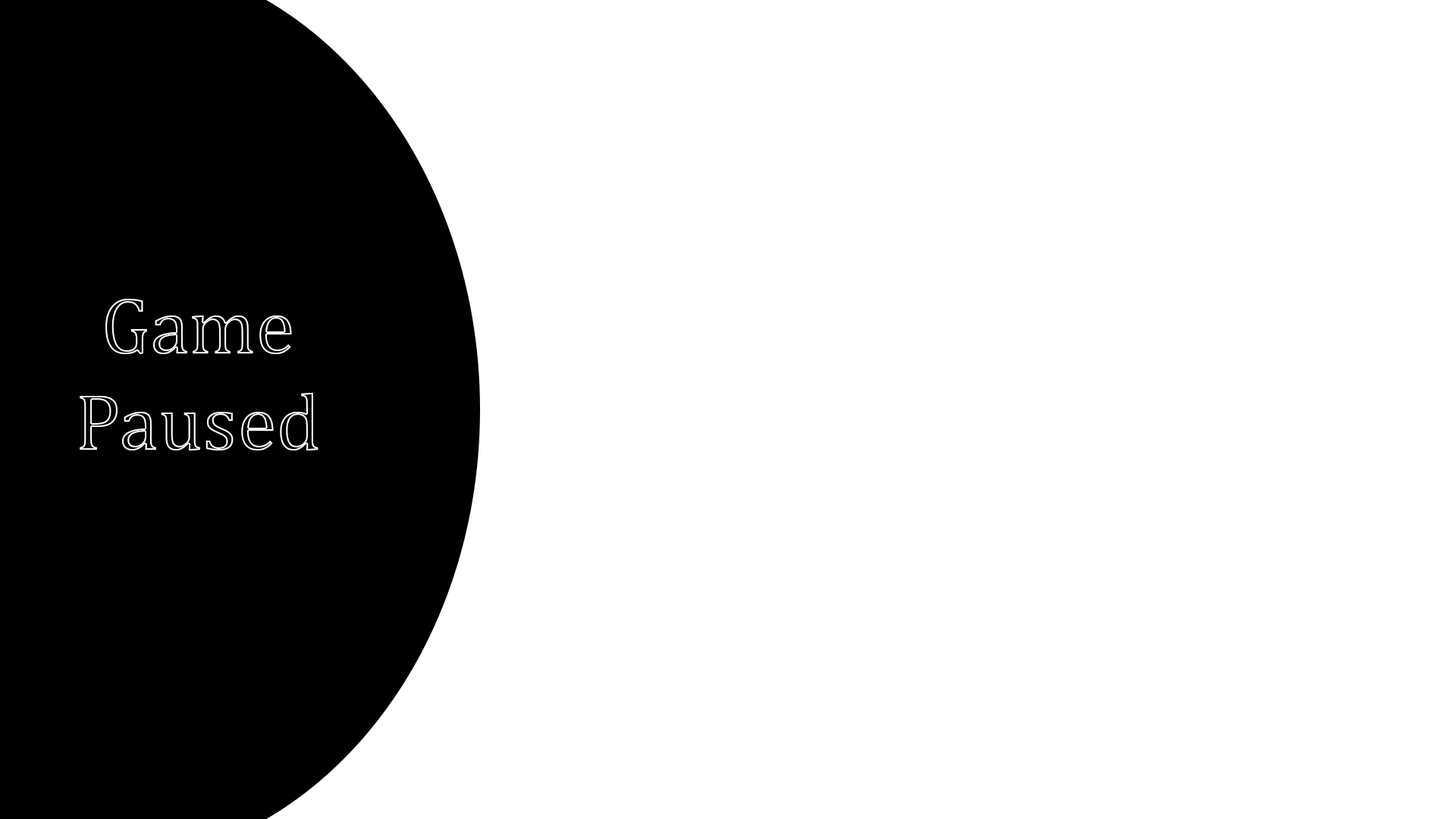
<style>
.page{position:relative;width:1456px;height:819px;background:#ffffff}
.page>*{position:absolute;margin:0}
.t1{font:80.3px "CambriaMath"}
</style>
<div class="page">
<p class="t1" style="left:80px;top:299px;width:238px;height:151px;text-align:center">Game<br>Paused</p>
</div>
